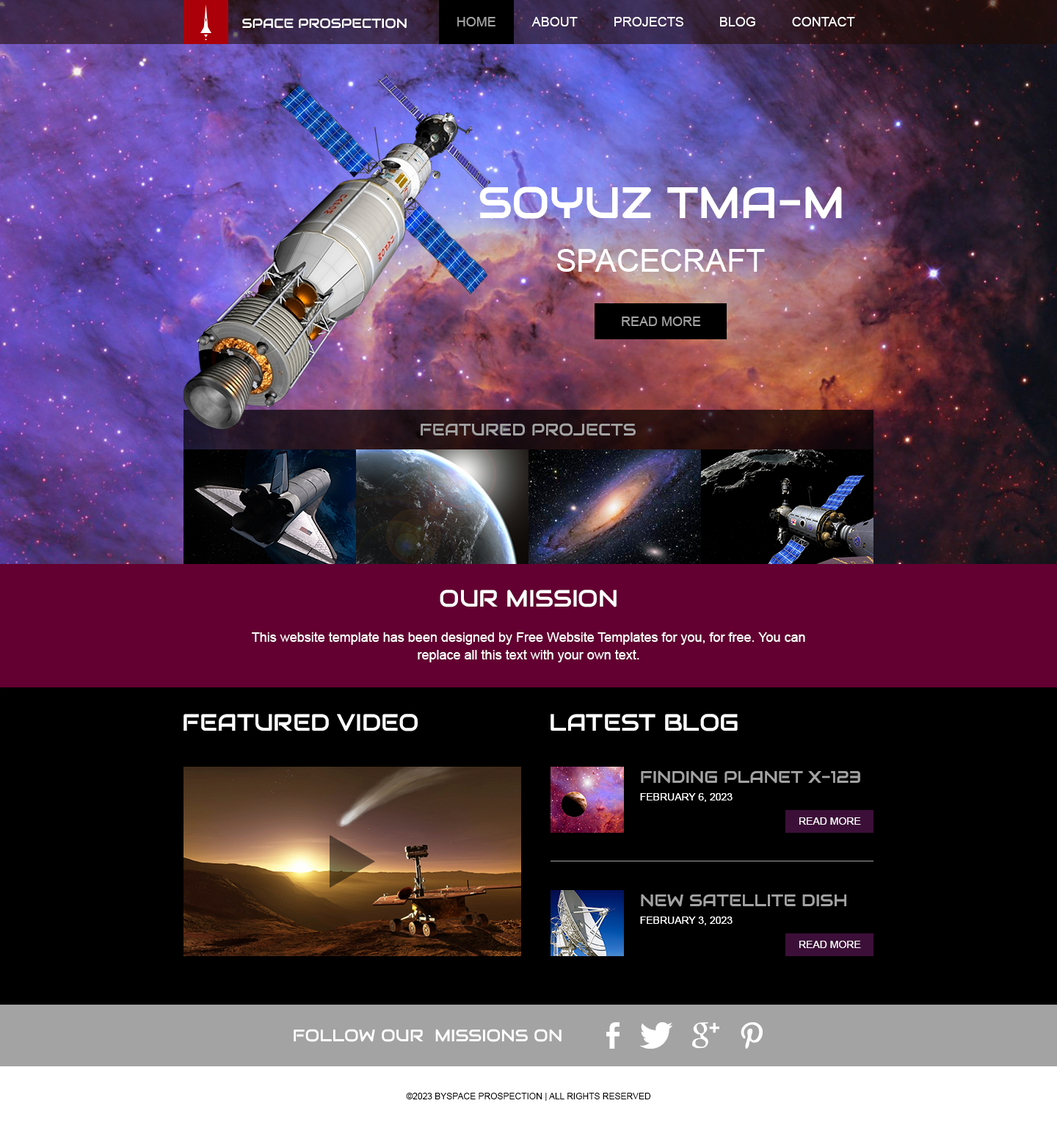
<style>
.page{position:relative;width:1057px;height:1128px;background:#000000}
.page>*{position:absolute;margin:0}
.t1{font:13.2px "ArialMT";color:#a3a3a3}
.t2{font:13.2px "ArialMT";color:#ffffff}
.t3{font:13.2px "Audiowide-Regular";color:#ffffff}
.t4{font:44.1px "Audiowide-Regular";color:#ffffff}
.t5{font:31.6px "ArialMT";color:#ffffff}
.t6{font:16.9px "Audiowide-Regular";color:#a3a3a3}
.t7{font:13.2px/17.6px "ArialMT";color:#ffffff}
.t8{font:23.5px/17.6px "Audiowide-Regular";color:#ffffff}
.t9{font:23.5px "Audiowide-Regular";color:#ffffff}
.t10{font:16.9px/17.6px "Audiowide-Regular";color:#a3a3a3}
.t11{font:10.3px/17.6px "ArialMT";color:#ffffff}
.t12{font:10.3px "ArialMT";color:#ffffff}
.t13{font:16.9px "Audiowide-Regular";color:#ffffff}
.t14{font:8.8px "ArialMT";color:#000000}
</style>
<div class="page">
<p class="t1" style="left:457px;top:17px;width:39px;height:9px">HOME</p>
<p class="t2" style="left:532px;top:17px;width:46px;height:9px">ABOUT</p>
<p class="t2" style="left:615px;top:17px;width:69px;height:9px">PROJECTS</p>
<p class="t2" style="left:720px;top:17px;width:36px;height:9px">BLOG</p>
<p class="t2" style="left:792px;top:17px;width:63px;height:9px">CONTACT</p>
<p class="t3" style="left:242px;top:18px;width:165px;height:11px">SPACE PROSPECTION</p>
<p class="t4" style="left:479px;top:186px;width:363px;height:33px">SOYUZ TMA-M</p>
<p class="t5" style="left:557px;top:249px;width:208px;height:23px">SPACECRAFT</p>
<p class="t1" style="left:622px;top:316px;width:79px;height:10px">READ MORE</p>
<p class="t6" style="left:421px;top:423px;width:215px;height:13px">FEATURED PROJECTS</p>
<p class="t7" style="left:252px;top:590px;width:553px;height:72px;text-align:center"><span class="t8">OUR MISSION<br><br></span>This website template has been designed by Free Website Templates for you, for free. You can replace all this text with your own text.</p>
<p class="t9" style="left:184px;top:714px;width:234px;height:17px">FEATURED VIDEO</p>
<p class="t9" style="left:551px;top:714px;width:187px;height:17px">LATEST BLOG</p>
<p class="t10" style="left:640px;top:770px;width:221px;height:155px">FINDING PLANET X-123<br><span class="t11">FEBRUARY 6, 2023<br><br><br><br><br><br></span>NEW SATELLITE DISH<br><span class="t11">FEBRUARY 3, 2023</span></p>
<p class="t12" style="left:800px;top:817px;width:61px;height:8px">READ MORE</p>
<p class="t12" style="left:800px;top:941px;width:61px;height:7px">READ MORE</p>
<p class="t13" style="left:294px;top:1029px;width:268px;height:13px">FOLLOW OUR  MISSIONS ON</p>
<p class="t14" style="left:406px;top:1093px;width:245px;height:8px">©2023 BYSPACE PROSPECTION | ALL RIGHTS RESERVED</p>
</div>
